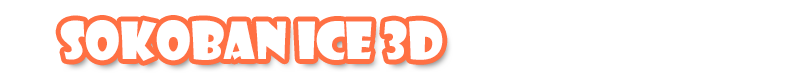
<style>
.page{position:relative;width:800px;height:80px;background:#ffffff}
.page>*{position:absolute;margin:0}
.t1{font:50px "ShowcardGothic-Reg";color:#ffffff}
</style>
<div class="page">
<p class="t1" style="left:60px;top:20px;width:383px;height:41px">SOKOBAN ICE 3d</p>
</div>
